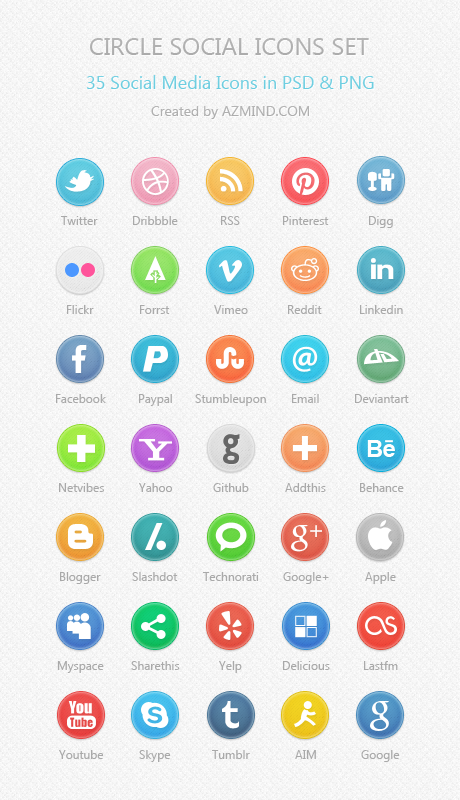
<style>
.page{position:relative;width:460px;height:800px}
.page>*{position:absolute;margin:0}
.t1{font:24px "SegoeUI";color:#aaaaaa}
.t2{font:18px "SegoeUI";color:#64cbdf}
.t3{font:14px "SegoeUI";color:#aaaaaa}
.t4{font:12px "SegoeUI";color:#aaaaaa}
.t5{font:24px "Arial-BoldMT";letter-spacing:-0.025em;color:#ffffff}
</style>
<div class="page">
<p class="t1" style="left:90px;top:38px;width:279px;height:17px">CIRCLE SOCIAL ICONS SET</p>
<p class="t2" style="left:87px;top:75px;width:287px;height:14px">35 Social Media Icons in PSD &amp; PNG</p>
<p class="t3" style="left:151px;top:106px;width:158px;height:13px">Created by AZMIND.COM</p>
<p class="t4" style="left:61px;top:216px;width:37px;height:9px">Twitter</p>
<p class="t4" style="left:133px;top:216px;width:45px;height:9px">Dribbble</p>
<p class="t4" style="left:221px;top:216px;width:19px;height:9px">RSS</p>
<p class="t4" style="left:283px;top:216px;width:46px;height:9px">Pinterest</p>
<p class="t4" style="left:369px;top:216px;width:24px;height:12px">Digg</p>
<p class="t4" style="left:67px;top:305px;width:27px;height:9px">Flickr</p>
<p class="t4" style="left:140px;top:305px;width:30px;height:9px">Forrst</p>
<p class="t4" style="left:214px;top:305px;width:34px;height:9px">Vimeo</p>
<p class="t4" style="left:288px;top:305px;width:34px;height:9px">Reddit</p>
<p class="t4" style="left:360px;top:305px;width:43px;height:9px">Linkedin</p>
<p class="t4" style="left:56px;top:394px;width:50px;height:9px">Facebook</p>
<p class="t4" style="left:139px;top:394px;width:33px;height:12px">Paypal</p>
<p class="t4" style="left:195px;top:394px;width:71px;height:12px">Stumbleupon</p>
<p class="t4" style="left:292px;top:394px;width:27px;height:9px">Email</p>
<p class="t4" style="left:355px;top:394px;width:54px;height:9px">Deviantart</p>
<p class="t5" style="left:367px;top:440px;width:28px;height:17px">Be</p>
<p class="t4" style="left:59px;top:483px;width:45px;height:9px">Netvibes</p>
<p class="t4" style="left:139px;top:483px;width:34px;height:9px">Yahoo</p>
<p class="t4" style="left:213px;top:483px;width:36px;height:9px">Github</p>
<p class="t4" style="left:285px;top:483px;width:41px;height:9px">Addthis</p>
<p class="t4" style="left:360px;top:483px;width:44px;height:9px">Behance</p>
<p class="t4" style="left:60px;top:572px;width:41px;height:12px">Blogger</p>
<p class="t4" style="left:132px;top:572px;width:46px;height:9px">Slashdot</p>
<p class="t4" style="left:203px;top:572px;width:56px;height:9px">Technorati</p>
<p class="t4" style="left:283px;top:572px;width:46px;height:12px">Google+</p>
<p class="t4" style="left:365px;top:572px;width:31px;height:12px">Apple</p>
<p class="t4" style="left:57px;top:661px;width:47px;height:12px">Myspace</p>
<p class="t4" style="left:131px;top:661px;width:49px;height:9px">Sharethis</p>
<p class="t4" style="left:219px;top:661px;width:23px;height:12px">Yelp</p>
<p class="t4" style="left:283px;top:661px;width:47px;height:9px">Delicious</p>
<p class="t4" style="left:364px;top:661px;width:34px;height:9px">Lastfm</p>
<p class="t4" style="left:59px;top:750px;width:45px;height:9px">Youtube</p>
<p class="t4" style="left:139px;top:750px;width:32px;height:12px">Skype</p>
<p class="t4" style="left:212px;top:750px;width:38px;height:9px">Tumblr</p>
<p class="t4" style="left:295px;top:750px;width:21px;height:9px">AIM</p>
<p class="t4" style="left:361px;top:750px;width:39px;height:12px">Google</p>
</div>
